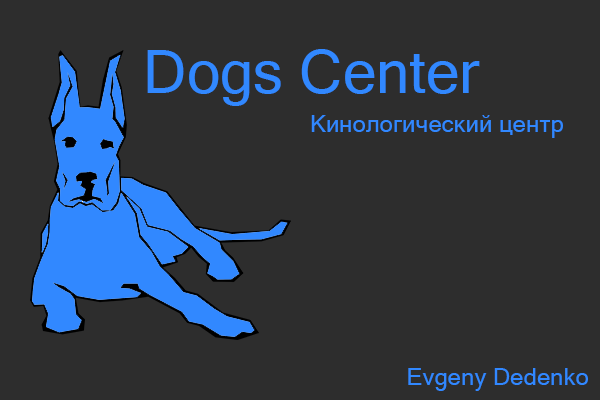
<style>
.page{position:relative;width:600px;height:400px;background:#2d2d2d}
.page>*{position:absolute;margin:0}
.t1{font:60px "MicrosoftSansSerif";color:#3188ff}
.t2{font:24px "MicrosoftSansSerif";color:#3188ff}
</style>
<div class="page">
<p class="t1" style="left:147px;top:49px;width:333px;height:57px">Dogs Center</p>
<p class="t2" style="left:311px;top:115px;width:252px;height:23px">Кинологический центр</p>
<p class="t2" style="left:408px;top:368px;width:180px;height:23px">Evgeny Dedenko</p>
</div>
